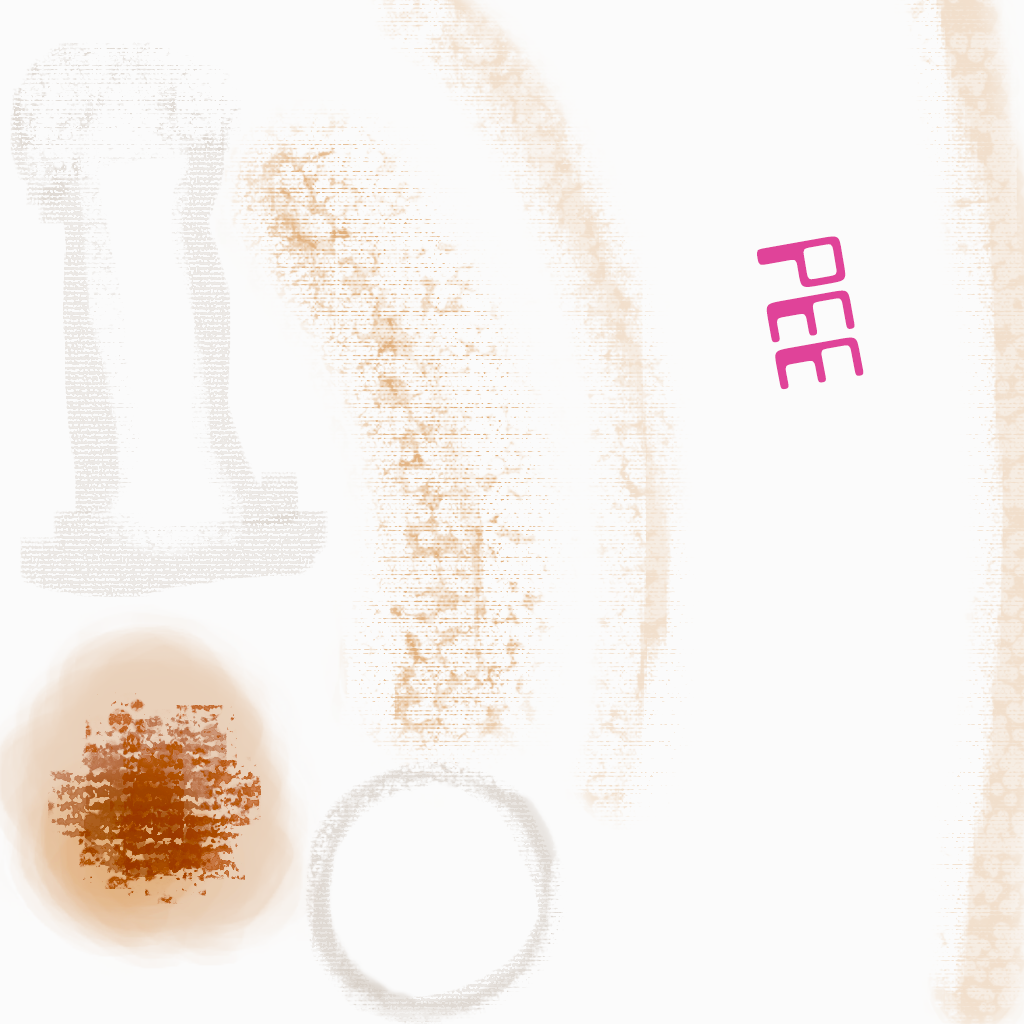
<style>
.page{position:relative;width:1024px;height:1024px;background:#fbfbfb}
.page>*{position:absolute;margin:0}
.t1{font:100px "LazenbyComputer-Smooth";letter-spacing:0.01em;color:#e04399;scale:0.9 1}
</style>
<div class="page">
<p class="t1" style="left:757px;top:236px;width:107px;height:154px;rotate:80deg">pee</p>
</div>
